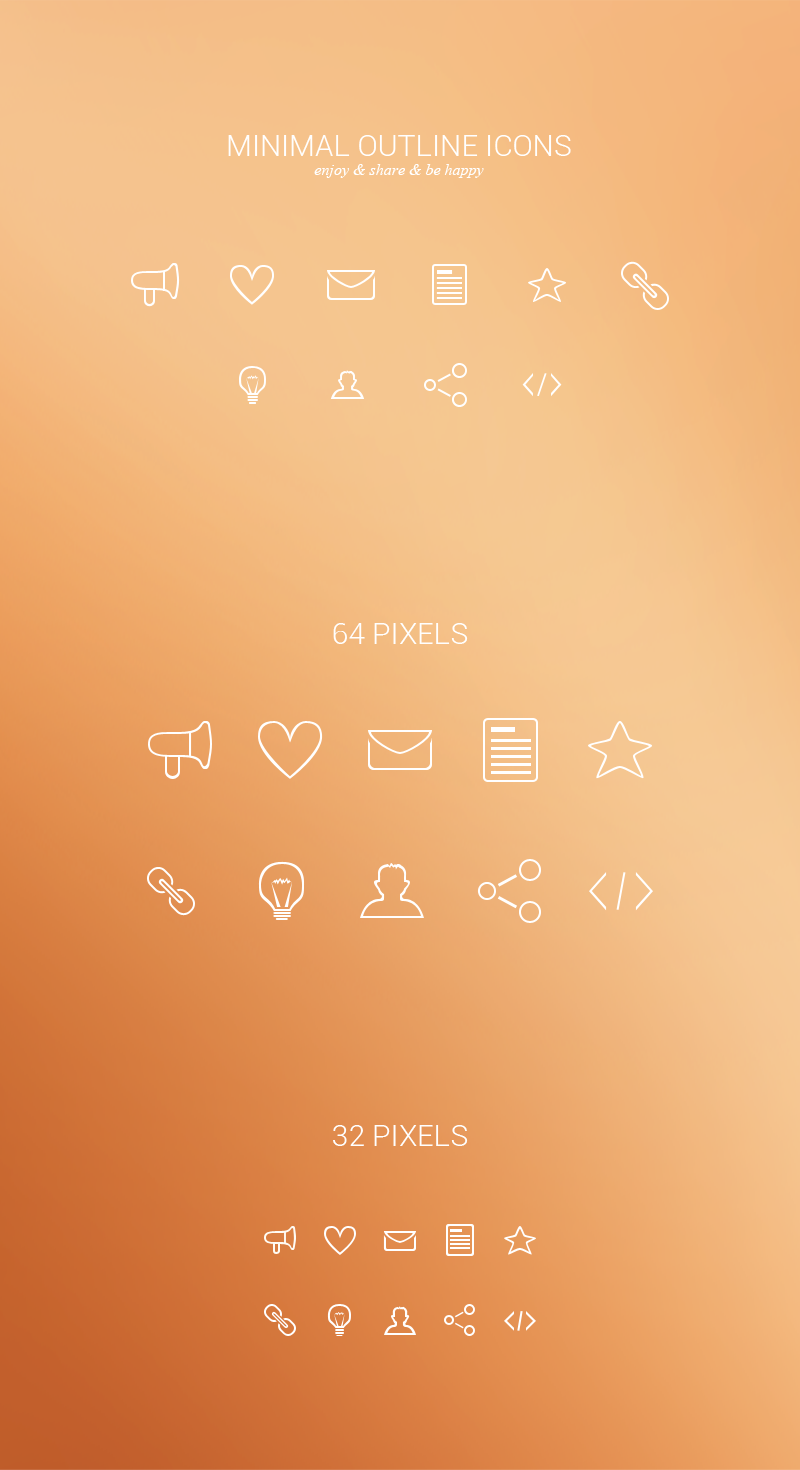
<style>
.page{position:relative;width:800px;height:1470px}
.page>*{position:absolute;margin:0}
.t1{font:16px "TimesNewRomanPS-ItalicMT";color:#ffffff}
.t2{font:30px "Roboto-Light";color:#ffffff}
</style>
<div class="page">
<p class="t1" style="left:228px;top:135px;width:343px;height:43px;text-align:center"><span class="t2">MINIMAL OUTLINE ICONS<br></span>enjoy &amp; share &amp; be happy</p>
<p class="t2" style="left:333px;top:623px;width:135px;height:21px">64 PIXELS</p>
<p class="t2" style="left:333px;top:1125px;width:135px;height:21px">32 PIXELS</p>
</div>
